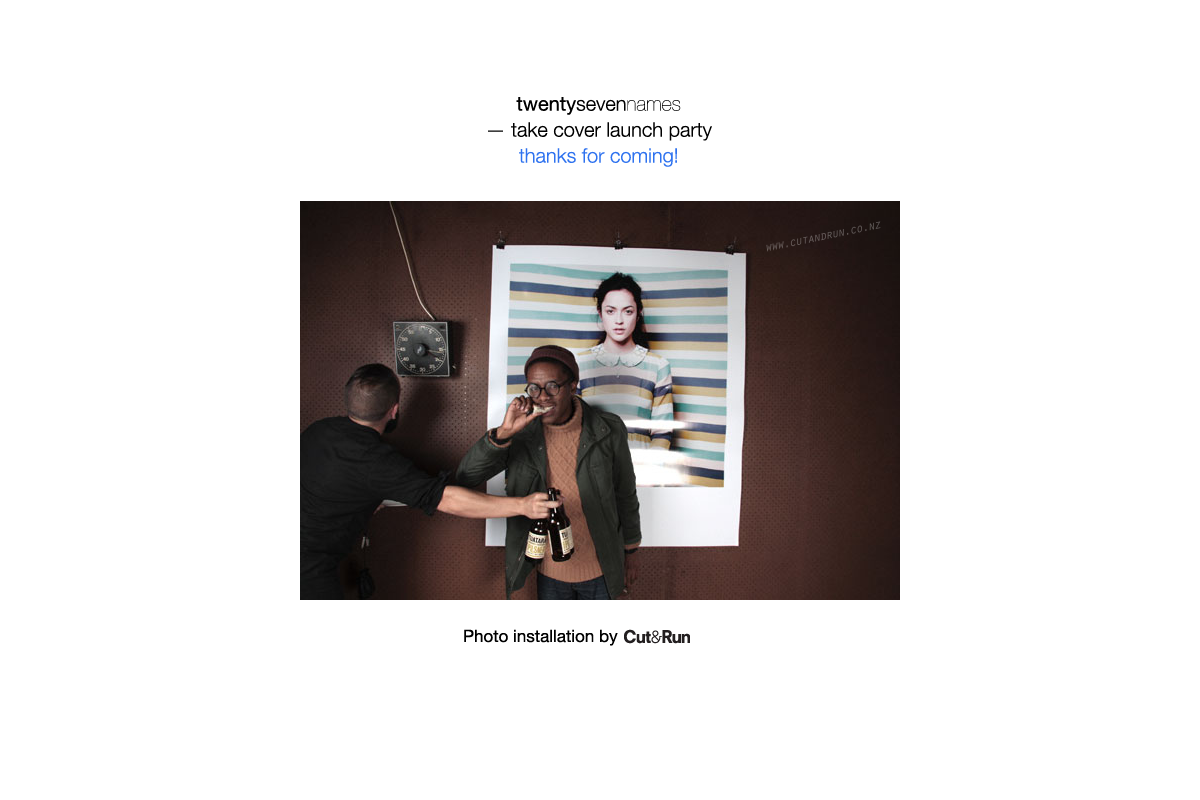
<style>
.page{position:relative;width:1200px;height:800px;background:#ffffff}
.page>*{position:absolute;margin:0}
.t1{font:20px/26px "HelveticaNeue-Light";color:#000000}
.t2{font:20px/26px "HelveticaNeue";color:#000000}
.t3{font:20px/26px "HelveticaNeue-UltraLight";color:#000000}
.t4{font:20px/26px "HelveticaNeue-Light";color:#2e72ef}
.t5{font:17px "HelveticaNeue";color:#000000}
</style>
<div class="page">
<p class="t1" style="left:488px;top:97px;width:224px;height:70px;text-align:center"><span class="t2">twenty</span>seven<span class="t3">names</span><br>— take cover launch party<br><span class="t4">thanks for coming!</span></p>
<p class="t5" style="left:464px;top:629px;width:154px;height:17px">Photo installation by</p>
</div>
